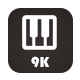
<style>
.page{position:relative;width:80px;height:80px;background:#ffffff}
.page>*{position:absolute;margin:0}
.t1{font:15px "Bauhaus93";color:#ffffff}
</style>
<div class="page">
<p class="t1" style="left:31px;top:56px;width:18px;height:12px">9K</p>
</div>
